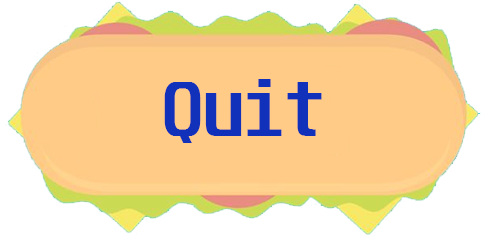
<style>
.page{position:relative;width:481px;height:235px;background:#ffcb87}
.page>*{position:absolute;margin:0}
.t1{font:66.7px "Unispace-Bold";color:#1231bb}
</style>
<div class="page">
<p class="t1" style="left:164px;top:79px;width:158px;height:64px">Quit</p>
</div>
